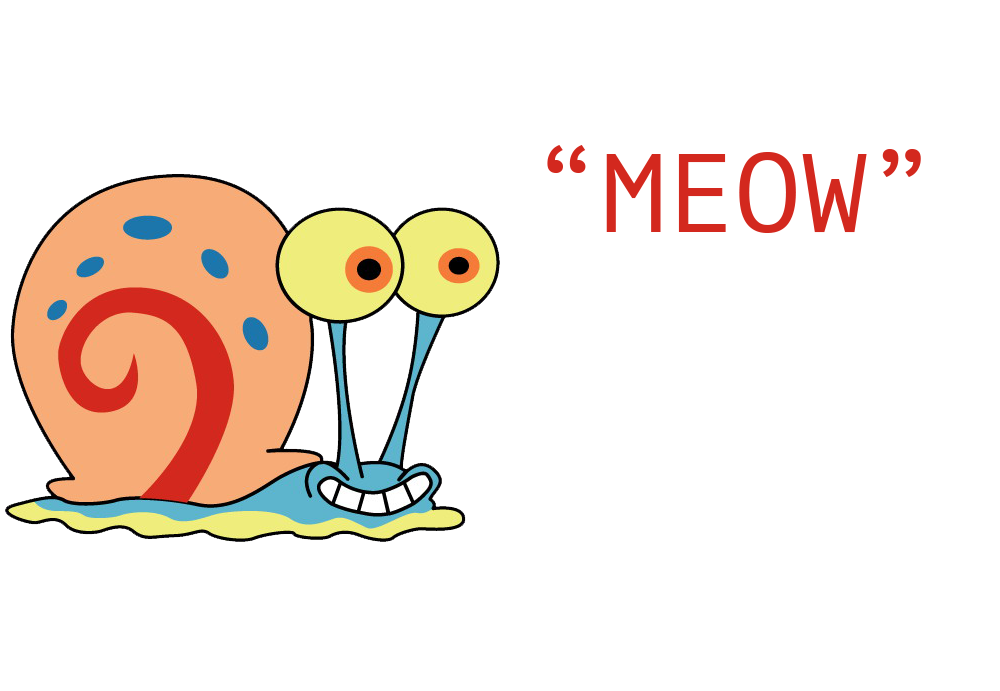
<style>
.page{position:relative;width:1000px;height:691px;background:#ffffff}
.page>*{position:absolute;margin:0}
.t1{font:111.9px "PTMono-Regular";color:#d3281e}
</style>
<div class="page">
<p class="t1" style="left:547px;top:145px;width:374px;height:88px">“MEOW”</p>
</div>
